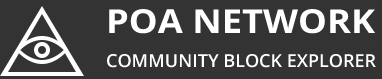
<style>
.page{position:relative;width:382px;height:79px;background:#333333}
.page>*{position:absolute;margin:0}
.t1{font:33px "OpenSans-Bold";color:#ffffff;scale:1.1 1}
.t2{font:18px "OpenSans-Semibold";color:#ffffff}
</style>
<div class="page">
<p class="t1" style="left:109px;top:9px;width:266px;height:25px">POA NETWORK</p>
<p class="t2" style="left:107px;top:54px;width:269px;height:14px">COMMUNITY BLOCK EXPLORER</p>
</div>
